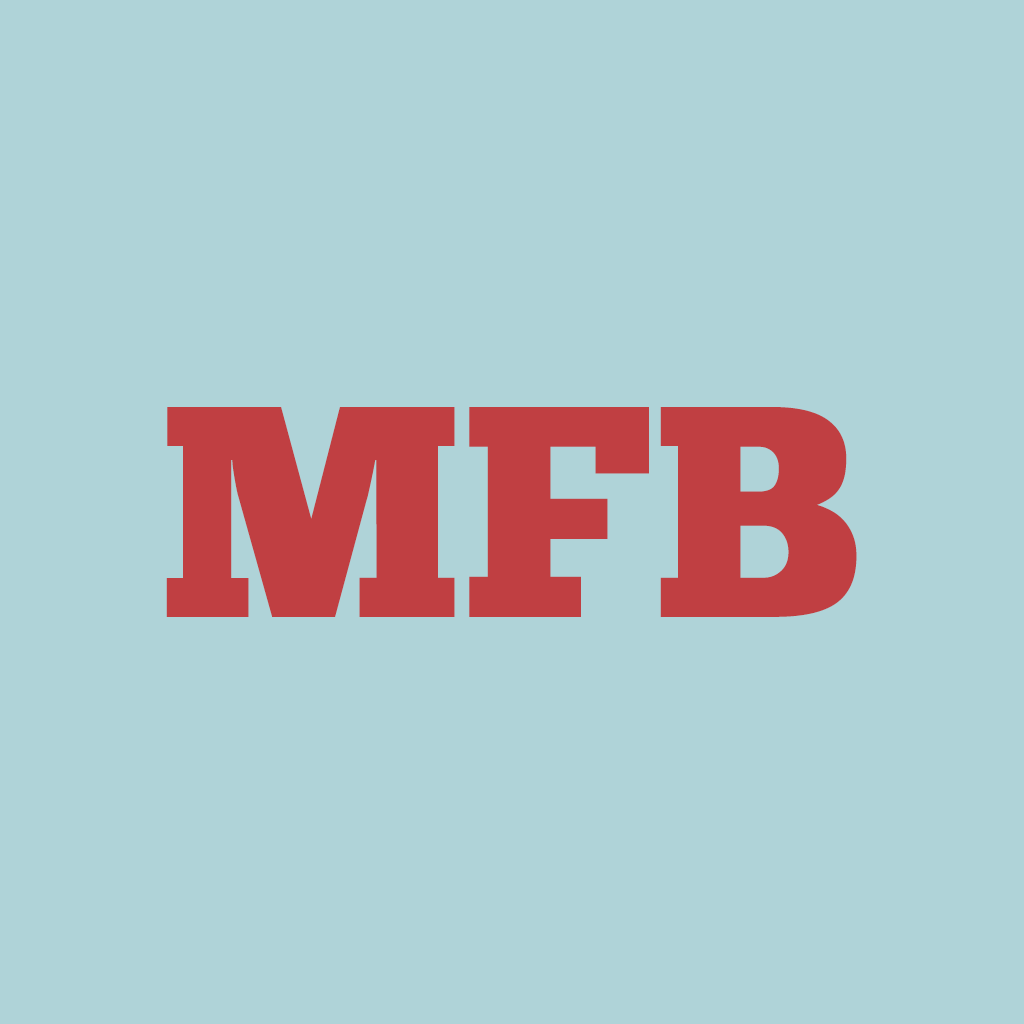
<style>
.page{position:relative;width:1024px;height:1024px;background:#afd3d8}
.page>*{position:absolute;margin:0}
.t1{font:300px "ChunkFive";color:#c03f42}
</style>
<div class="page">
<p class="t1" style="left:166px;top:407px;width:691px;height:210px">MFB</p>
</div>
